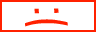
<style>
.page{position:relative;width:96px;height:32px;background:#ffffff}
.page>*{position:absolute;margin:0}
.t1{font:48.1px "ErasITC-Medium";color:#ff2100}
</style>
<div class="page">
<p class="t1" style="left:25px;top:8px;width:43px;height:19px;rotate:86deg">:(</p>
</div>
